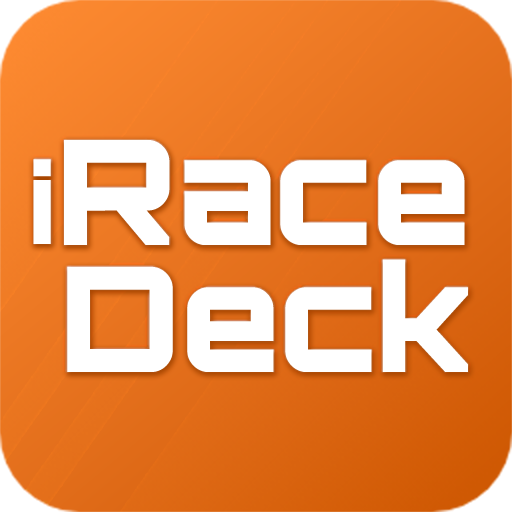
<style>
.page{position:relative;width:512px;height:512px;background:#ffffff}
.page>*{position:absolute;margin:0}
.t1{font:146px/127.2px "Orbitron-Black";color:#ffffff}
.t2{font:110px "Orbitron-Black";color:#ffffff}
</style>
<div class="page">
<p class="t1" style="left:64px;top:140px;width:404px;height:232px;text-align:center">Race<br>Deck</p>
<p class="t2" style="left:33px;top:159px;width:18px;height:85px">i</p>
</div>
